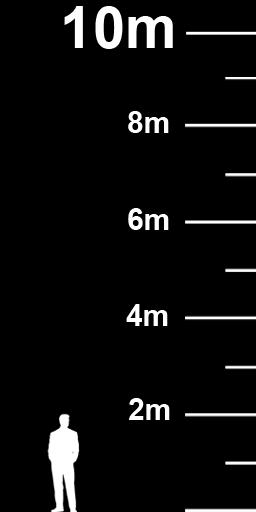
<style>
.page{position:relative;width:256px;height:512px;background:#000000}
.page>*{position:absolute;margin:0}
.t1{font:58.2px "Arial-BoldMT";color:#ffffff}
.t2{font:29.9px "Arial-BoldMT";color:#ffffff}
</style>
<div class="page">
<p class="t1" style="left:64px;top:6px;width:109px;height:43px">10m</p>
<p class="t2" style="left:128px;top:111px;width:41px;height:22px">8m</p>
<p class="t2" style="left:128px;top:208px;width:41px;height:22px">6m</p>
<p class="t2" style="left:126px;top:304px;width:42px;height:22px">4m</p>
<p class="t2" style="left:128px;top:398px;width:42px;height:22px">2m</p>
</div>
